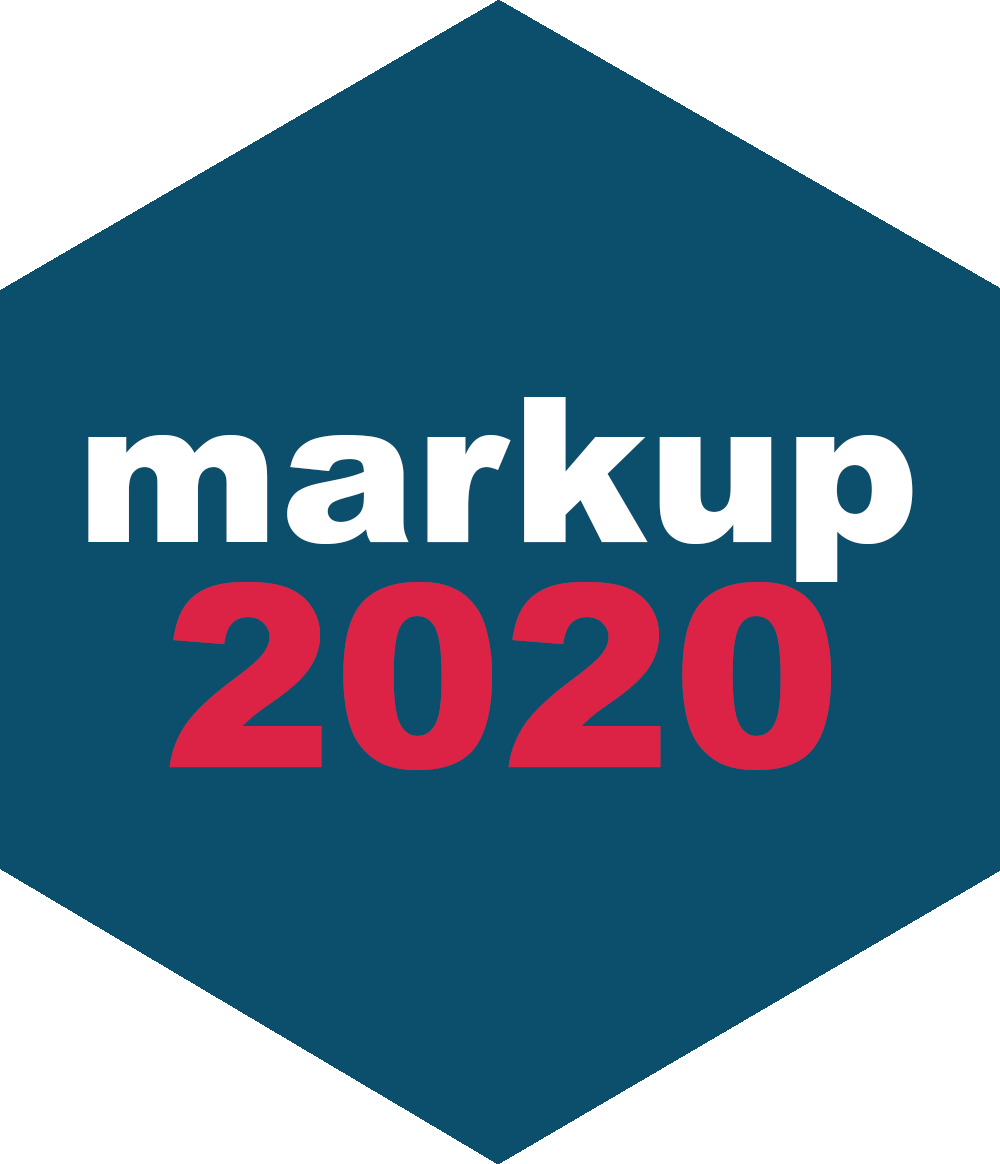
<style>
.page{position:relative;width:1000px;height:1164px;background:#0c4f6c}
.page>*{position:absolute;margin:0}
.t1{font:203.3px "Arial-Black";color:#ffffff}
.t2{font:254.2px "Arial-Black";color:#dc2345}
</style>
<div class="page">
<p class="t1" style="left:88px;top:397px;width:825px;height:185px">markup</p>
<p class="t2" style="left:169px;top:582px;width:662px;height:188px">2020</p>
</div>
